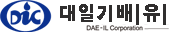
<style>
.page{position:relative;width:173px;height:33px;background:#ffffff}
.page>*{position:absolute;margin:0}
.t1{font:16px "AdobeGothicStd-Bold";letter-spacing:0.14em;color:#302e2e;font-weight:bold}
</style>
<div class="page">
<p class="t1" style="left:60px;top:4px;width:106px;height:21px">대일기배|유|</p>
</div>
